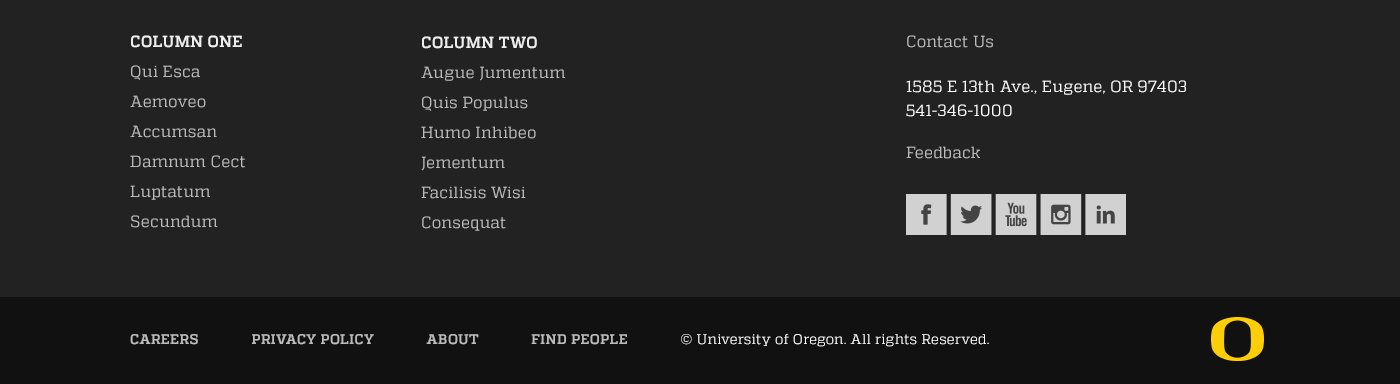
<style>
.page{position:relative;width:1400px;height:384px;background:#222222}
.page>*{position:absolute;margin:0}
.t1{font:16px/30px "Quadon-Regular";letter-spacing:0.025em;color:#bbbbbb}
.t2{font:16px/34px "Quadon-Bold";letter-spacing:0.025em;color:#eeeeee}
.t3{font:16px/24px "Quadon-Regular";letter-spacing:0.025em;color:#ffffff}
.t4{font:16px/21px "Quadon-Regular";letter-spacing:0.025em;color:#bbbbbb}
.t5{font:14px "Quadon-Bold";letter-spacing:0.025em;color:#bbbbbb;text-transform:uppercase}
.t6{font:14px "Quadon-Regular";letter-spacing:0.025em;color:#ffffff;text-transform:uppercase}
.t7{font:14px "Quadon-Regular";letter-spacing:0.025em;color:#ffffff}
</style>
<div class="page">
<p class="t1" style="left:130px;top:35px;width:115px;height:193px"><span class="t2">COLUMN ONE<br></span>Qui Esca<br>Aemoveo<br>Accumsan<br>Damnum Cect<br>Luptatum<br>Secundum</p>
<p class="t1" style="left:421px;top:36px;width:144px;height:195px"><span class="t2">COLUMN TWO<br></span>Augue Jumentum<br>Quis Populus<br>Humo Inhibeo <br>Jementum<br>Facilisis Wisi<br>Consequat</p>
<p class="t3" style="left:906px;top:35px;width:280px;height:124px"><span class="t4">Contact Us<br><br></span>1585 E 13th Ave., Eugene, OR 97403<br>541-346-1000<br><span class="t4"><br>Feedback</span></p>
<p class="t5" style="left:130px;top:333px;width:859px;height:14px">Careers              Privacy Policy              About              FIND PEOPLE              <span class="t6">© </span><span class="t7">University of Oregon. All rights Reserved.</span></p>
</div>
